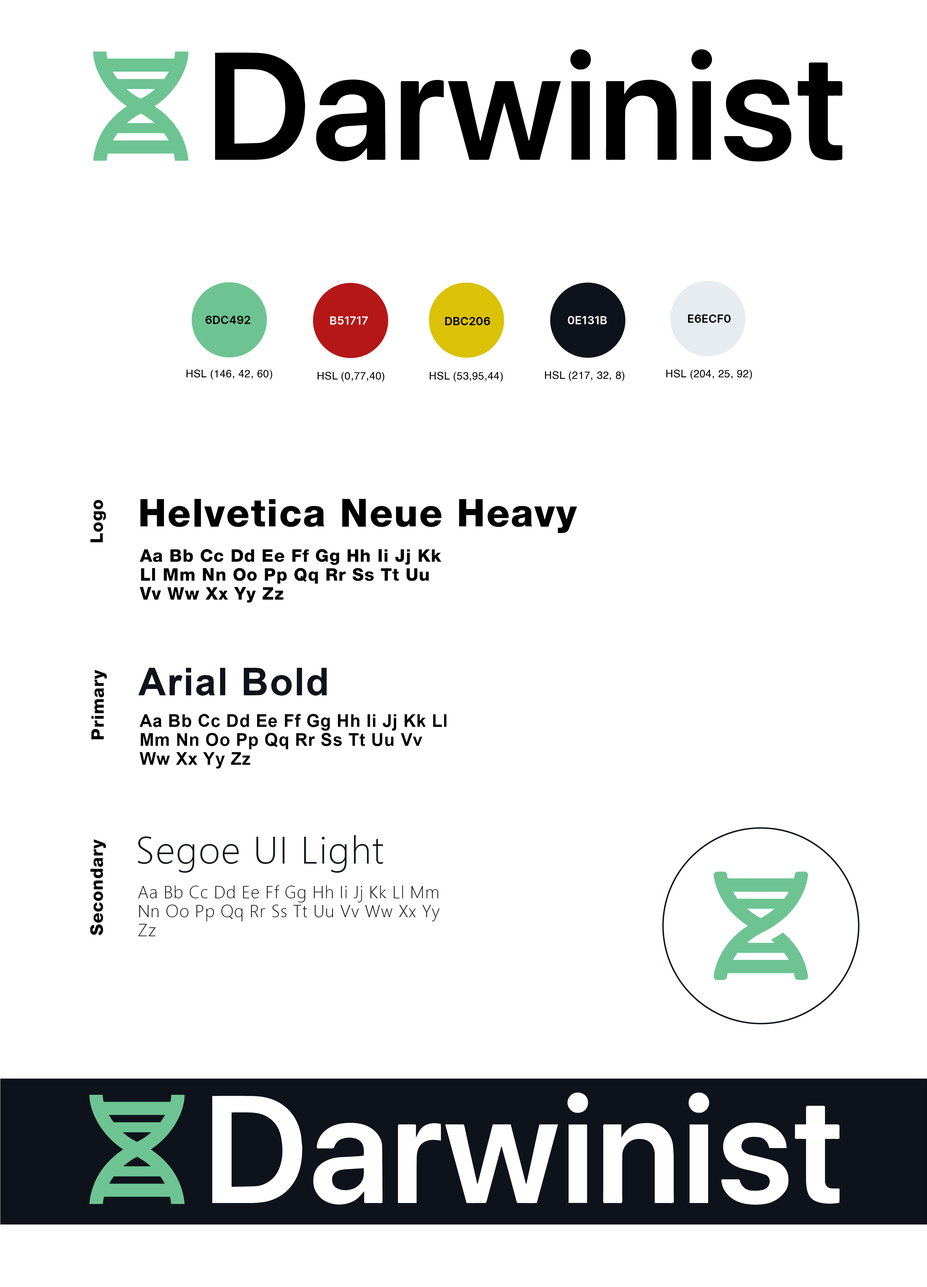
<style>
.page{position:relative;width:927px;height:1287px;background:#ffffff}
.page>*{position:absolute;margin:0}
.t1{font:17.4px "HelveticaNeueHeavy";letter-spacing:0.03em;color:#000000}
.t2{font:38.2px "HelveticaNeueHeavy";letter-spacing:0.03em;color:#000000}
.t3{font:38.2px "Arial-BoldMT";letter-spacing:0.03em;color:#0e131b}
.t4{font:17.4px "Arial-BoldMT";letter-spacing:0.03em;color:#000000}
.t5{font:38.2px "SegoeUI-Light";letter-spacing:0.03em;color:#0e131b}
.t6{font:17.4px "SegoeUI-Light";letter-spacing:0.03em;color:#000000}
</style>
<div class="page">
<p class="t1" style="left:90px;top:500px;width:16px;height:42px;rotate:-90deg">Logo</p>
<p class="t2" style="left:140px;top:499px;width:437px;height:34px">Helvetica Neue Heavy</p>
<p class="t1" style="left:140px;top:549px;width:301px;height:54px">Aa Bb Cc Dd Ee Ff Gg Hh Ii Jj Kk Ll Mm Nn Oo Pp Qq Rr Ss Tt Uu Vv Ww Xx Yy Zz</p>
<p class="t1" style="left:91px;top:670px;width:16px;height:69px;rotate:-90deg">Primary</p>
<p class="t3" style="left:138px;top:668px;width:189px;height:28px">Arial Bold</p>
<p class="t4" style="left:140px;top:714px;width:306px;height:54px">Aa Bb Cc Dd Ee Ff Gg Hh Ii Jj Kk Ll Mm Nn Oo Pp Qq Rr Ss Tt Uu Vv Ww Xx Yy Zz</p>
<p class="t1" style="left:90px;top:839px;width:16px;height:96px;rotate:-90deg">Secondary</p>
<p class="t5" style="left:138px;top:835px;width:245px;height:38px">Segoe UI Light</p>
<p class="t6" style="left:138px;top:885px;width:301px;height:51px">Aa Bb Cc Dd Ee Ff Gg Hh Ii Jj Kk Ll Mm Nn Oo Pp Qq Rr Ss Tt Uu Vv Ww Xx Yy Zz</p>
</div>
